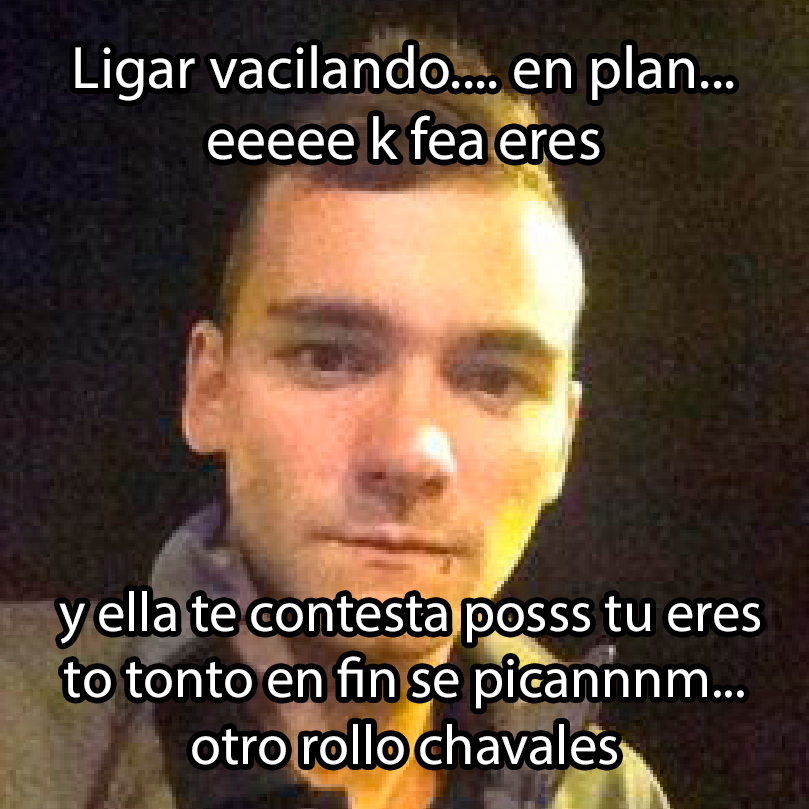
<style>
.page{position:relative;width:809px;height:809px}
.page>*{position:absolute;margin:0}
.t1{font:60.1px "MyriadPro-Regular";color:#ffffff}
.t2{font:56.3px "MyriadPro-Regular";color:#ffffff}
</style>
<div class="page">
<p class="t1" style="left:75px;top:45px;width:659px;height:115px;text-align:center">Ligar vacilando.... en plan...<br>eeeee k fea eres</p>
<p class="t2" style="left:59px;top:591px;width:701px;height:174px;text-align:center">y ella te contesta posss tu eres<br>to tonto en fin se picannnm...<br>otro rollo chavales</p>
</div>
